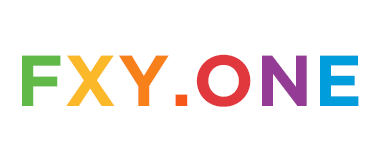
<style>
.page{position:relative;width:380px;height:160px;background:#ffffff}
.page>*{position:absolute;margin:0}
.t1{font:72px "Gotham-Bold";letter-spacing:0.02em;color:#61b948}
.t2{font:72px "Gotham-Bold";letter-spacing:0.02em;color:#fbb829}
.t3{font:72px "Gotham-Bold";letter-spacing:0.02em;color:#f7801a}
.t4{font:72px "Gotham-Bold";letter-spacing:0.02em;color:#f7581a}
.t5{font:72px "Gotham-Bold";letter-spacing:0.02em;color:#e1383d}
.t6{font:72px "Gotham-Bold";letter-spacing:0.02em;color:#943b95}
.t7{font:72px "Gotham-Bold";letter-spacing:0.02em;color:#009ddc}
</style>
<div class="page">
<p class="t1" style="left:22px;top:54px;width:337px;height:53px">F<span class="t2">X</span><span class="t3">Y</span><span class="t4">.</span><span class="t5">O</span><span class="t6">N</span><span class="t7">E</span></p>
</div>
